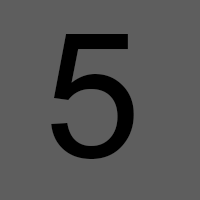
<style>
.page{position:relative;width:200px;height:200px;background:#5e5e5e}
.page>*{position:absolute;margin:0}
.t1{font:174.2px "ArialMT";color:#000000}
</style>
<div class="page">
<p class="t1" style="left:51px;top:34px;width:83px;height:125px">5</p>
</div>
